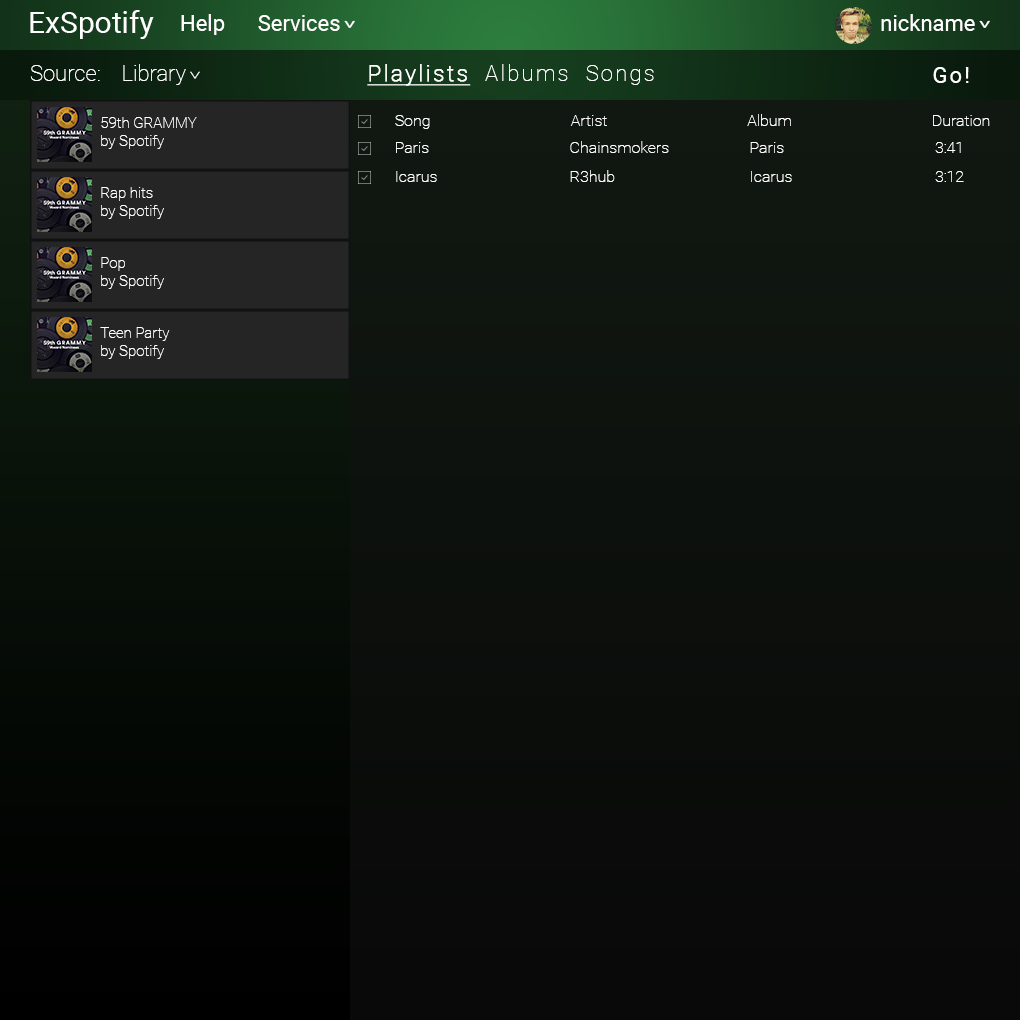
<style>
.page{position:relative;width:1020px;height:1020px}
.page>*{position:absolute;margin:0}
.t1{font:30px "Roboto-Regular";color:#ffffff}
.t2{font:22px "Roboto-Regular";color:#ffffff}
.t3{font:23.8px "Roboto-Regular";letter-spacing:0.16em;color:#ffffff;scale:0.67 1}
.t4{font:22px "Roboto-Thin";color:#ffffff}
.t5{font:22px "Roboto-Thin";letter-spacing:0.1em;color:#ffffff}
.t6{font:22px "Roboto-Thin";letter-spacing:0.1em;color:#ffffff;font-weight:bold;text-decoration:underline}
.t7{font:23.8px "Roboto-Thin";letter-spacing:0.16em;color:#ffffff;scale:0.67 1}
.t8{font:22px "Roboto-Regular";letter-spacing:0.1em;color:#ffffff}
.t9{font:15px "Roboto-Thin";color:#ffffff}
.t10{font:16px "Roboto-Thin";color:#ffffff}
</style>
<div class="page">
<p class="t1" style="left:30px;top:10px;width:124px;height:29px">ExSpotify</p>
<p class="t2" style="left:181px;top:14px;width:794px;height:21px">Help      Services                  nickname</p>
<p class="t3" style="left:344px;top:20px;width:11px;height:8px;rotate:90deg">&gt;</p>
<p class="t3" style="left:979px;top:20px;width:11px;height:8px;rotate:90deg">&gt;</p>
<p class="t4" style="left:30px;top:64px;width:156px;height:21px">Source:    Library</p>
<p class="t5" style="left:367px;top:64px;width:287px;height:22px"><span class="t6">Playlists</span>  Albums  Songs</p>
<p class="t7" style="left:190px;top:71px;width:10px;height:8px;rotate:90deg">&gt;</p>
<p class="t8" style="left:933px;top:67px;width:36px;height:16px">Go!</p>
<p class="t9" style="left:101px;top:117px;width:96px;height:32px">59th GRAMMY<br>by Spotify</p>
<p class="t10" style="left:395px;top:114px;width:595px;height:15px">Song  Artist Album Duration</p>
<p class="t10" style="left:396px;top:141px;width:565px;height:12px">Paris            Chainsmokers          Paris      3:41</p>
<p class="t10" style="left:396px;top:170px;width:568px;height:12px">Icarus            R3hub            Icarus     3:12</p>
<p class="t9" style="left:101px;top:187px;width:63px;height:32px">Rap hits<br>by Spotify</p>
<p class="t9" style="left:101px;top:257px;width:63px;height:32px">Pop<br>by Spotify</p>
<p class="t9" style="left:100px;top:327px;width:70px;height:32px">Teen Party<br>by Spotify</p>
</div>
